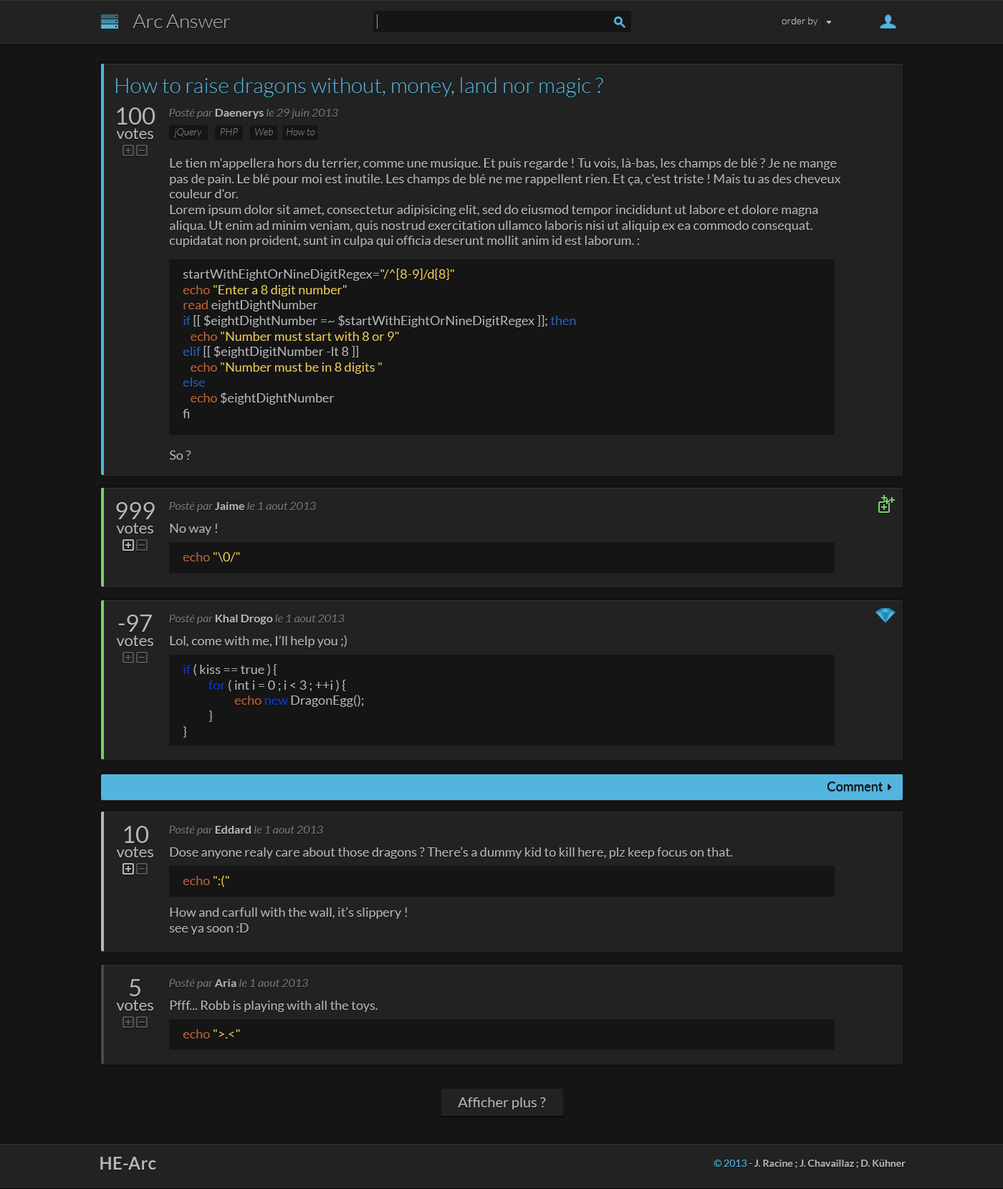
<style>
.page{position:relative;width:1003px;height:1189px;background:#151515}
.page>*{position:absolute;margin:0}
.t1{font:19.3px "Lato-Light";color:#b6b6b6}
.t2{font:10px "Lato-Light";color:#b6b6b6}
.t3{font:21.5px "Lato-Light";color:#52b5de}
.t4{font:15.7px/14.3px "Lato-Regular";color:#b6b6b6}
.t5{font:23.6px "Lato-Regular";color:#b6b6b6}
.t6{font:11.5px "Lato-Italic";color:#767676}
.t7{font:11.5px "Lato-Bold";color:#b6b6b6}
.t8{font:10px "Lato-LightItalic";color:#767676}
.t9{font:12.9px "Lato-Regular";color:#b6b6b6}
.t10{font:12.9px "Lato-Regular";color:#edc95b}
.t11{font:12.9px "Lato-Regular";color:#bf6137}
.t12{font:12.9px "Lato-Regular";color:#2b5fb5}
.t13{font:12.9px "Lato-Regular";color:#103bdb}
.t14{font:12.9px "Lato-Regular";color:#151515}
.t15{font:14.3px "Lato-Regular";color:#b6b6b6}
.t16{font:17.2px "Lato-Bold";color:#b6b6b6}
.t17{font:10px "Lato-Bold";color:#b6b6b6}
.t18{font:10px "Lato-Regular";color:#52b5de}
.t19{font:10px "Lato-Regular";color:#b6b6b6}
</style>
<div class="page">
<p class="t1" style="left:133px;top:14px;width:98px;height:14px">Arc Answer</p>
<p class="t2" style="left:781px;top:17px;width:37px;height:9px">order by</p>
<p class="t3" style="left:116px;top:77px;width:487px;height:20px">How to raise dragons without, money, land nor magic ?</p>
<p class="t4" style="left:116px;top:107px;width:39px;height:32px;text-align:center"><span class="t5">100<br></span>votes</p>
<p class="t6" style="left:169px;top:109px;width:169px;height:10px">Posté par <span class="t7">Daenerys </span>le 29 juin 2013</p>
<p class="t8" style="left:173px;top:128px;width:29px;height:10px">jQuery</p>
<p class="t8" style="left:220px;top:128px;width:18px;height:7px">PHP</p>
<p class="t8" style="left:255px;top:128px;width:19px;height:7px">Web</p>
<p class="t8" style="left:287px;top:128px;width:28px;height:7px">How to</p>
<p class="t9" style="left:169px;top:158px;width:672px;height:89px">Le tien m'appellera hors du terrier, comme une musique. Et puis regarde ! Tu vois, là-bas, les champs de blé ? Je ne mange pas de pain. Le blé pour moi est inutile. Les champs de blé ne me rappellent rien. Et ça, c'est triste ! Mais tu as des cheveux couleur d'or.<br>Lorem ipsum dolor sit amet, consectetur adipisicing elit, sed do eiusmod tempor incididunt ut labore et dolore magna aliqua. Ut enim ad minim veniam, quis nostrud exercitation ullamco laboris nisi ut aliquip ex ea commodo consequat. cupidatat non proident, sunt in culpa qui officia deserunt mollit anim id est laborum. :</p>
<p class="t9" style="left:183px;top:269px;width:393px;height:149px">startWithEightOrNineDigitRegex=<span class="t10">"/^[8-9]/d{8}"<br></span><span class="t11">echo </span><span class="t10">"Enter a 8 digit number"<br></span><span class="t11">read </span>eightDightNumber<br><span class="t12">if</span> [[ $eightDightNumber =~ $startWithEightOrNineDigitRegex ]]; <span class="t12">then<br>   </span><span class="t11">echo </span><span class="t10">"Number must start with 8 or 9"<br></span><span class="t12">elif </span>[[ $eightDigitNumber -lt 8 ]]<br>   <span class="t11">echo </span><span class="t10">"Number must be in 8 digits "<br></span><span class="t12">else<br>   </span><span class="t11">echo </span>$eightDightNumber<br>fi</p>
<p class="t9" style="left:169px;top:451px;width:22px;height:9px">So ?</p>
<p class="t4" style="left:116px;top:502px;width:39px;height:32px;text-align:center"><span class="t5">999<br></span>votes</p>
<p class="t6" style="left:169px;top:502px;width:147px;height:10px">Posté par <span class="t7">Jaime </span>le 1 aout 2013</p>
<p class="t9" style="left:170px;top:524px;width:47px;height:11px">No way !</p>
<p class="t10" style="left:183px;top:552px;width:57px;height:10px"><span class="t11">echo </span>"\0/"</p>
<p class="t4" style="left:116px;top:615px;width:37px;height:31px;text-align:center"><span class="t5">-97<br></span>votes</p>
<p class="t6" style="left:169px;top:615px;width:176px;height:10px">Posté par <span class="t7">Khal Drogo </span>le 1 aout 2013</p>
<p class="t9" style="left:170px;top:635px;width:177px;height:13px">Lol, come with me, I’ll help you ;)</p>
<p class="t9" style="left:183px;top:664px;width:181px;height:74px"><span class="t13">if</span> ( kiss == true ) {<br> <span class="t13">for </span>( int i = 0 ; i &lt; 3 ; ++i ) {<br>  <span class="t11">echo </span><span class="t13">new </span>DragonEgg();<br> }<br>}</p>
<p class="t14" style="left:827px;top:781px;width:55px;height:10px">Comment</p>
<p class="t4" style="left:116px;top:826px;width:37px;height:31px;text-align:center"><span class="t5">10<br></span>votes</p>
<p class="t6" style="left:169px;top:826px;width:154px;height:10px">Posté par <span class="t7">Eddard </span>le 1 aout 2013</p>
<p class="t9" style="left:170px;top:847px;width:562px;height:12px">Dose anyone realy care about those dragons ? There’s a dummy kid to kill here, plz keep focus on that.</p>
<p class="t11" style="left:183px;top:875px;width:46px;height:13px">echo <span class="t10">":("</span></p>
<p class="t9" style="left:169px;top:907px;width:238px;height:28px">How and carfull with the wall, it’s slippery !<br>see ya soon :D</p>
<p class="t4" style="left:116px;top:979px;width:37px;height:32px;text-align:center"><span class="t5">5<br></span>votes</p>
<p class="t6" style="left:169px;top:979px;width:139px;height:10px">Posté par <span class="t7">Aria </span>le 1 aout 2013</p>
<p class="t9" style="left:170px;top:1001px;width:207px;height:11px">Pfff... Robb is playing with all the toys.</p>
<p class="t10" style="left:183px;top:1029px;width:57px;height:10px"><span class="t11">echo </span>"&gt;.&lt;"</p>
<p class="t15" style="left:458px;top:1097px;width:88px;height:13px">Afficher plus ?</p>
<p class="t16" style="left:100px;top:1157px;width:56px;height:13px">HE-Arc</p>
<p class="t17" style="left:713px;top:1160px;width:192px;height:8px"><span class="t18">© 2013 </span><span class="t19">- </span>J. Racine ; J. Chavaillaz ; D. Kühner</p>
</div>
